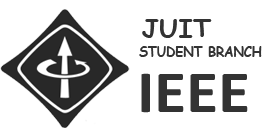
<style>
.page{position:relative;width:274px;height:130px;background:#ffffff}
.page>*{position:absolute;margin:0}
.t1{font:24px "ComicSansMS-Bold";color:#333333;scale:1.1 1}
.t2{font:14px "ComicSansMS-Bold";color:#333333;scale:0.91 1}
.t3{font:60px "Calibri-Bold";color:#333333;scale:1.1 1}
</style>
<div class="page">
<p class="t1" style="left:142px;top:19px;width:70px;height:19px">JUIT</p>
<p class="t2" style="left:139px;top:46px;width:123px;height:11px">STUDENT BRANCH</p>
<p class="t3" style="left:141px;top:73px;width:107px;height:40px">IEEE</p>
</div>
